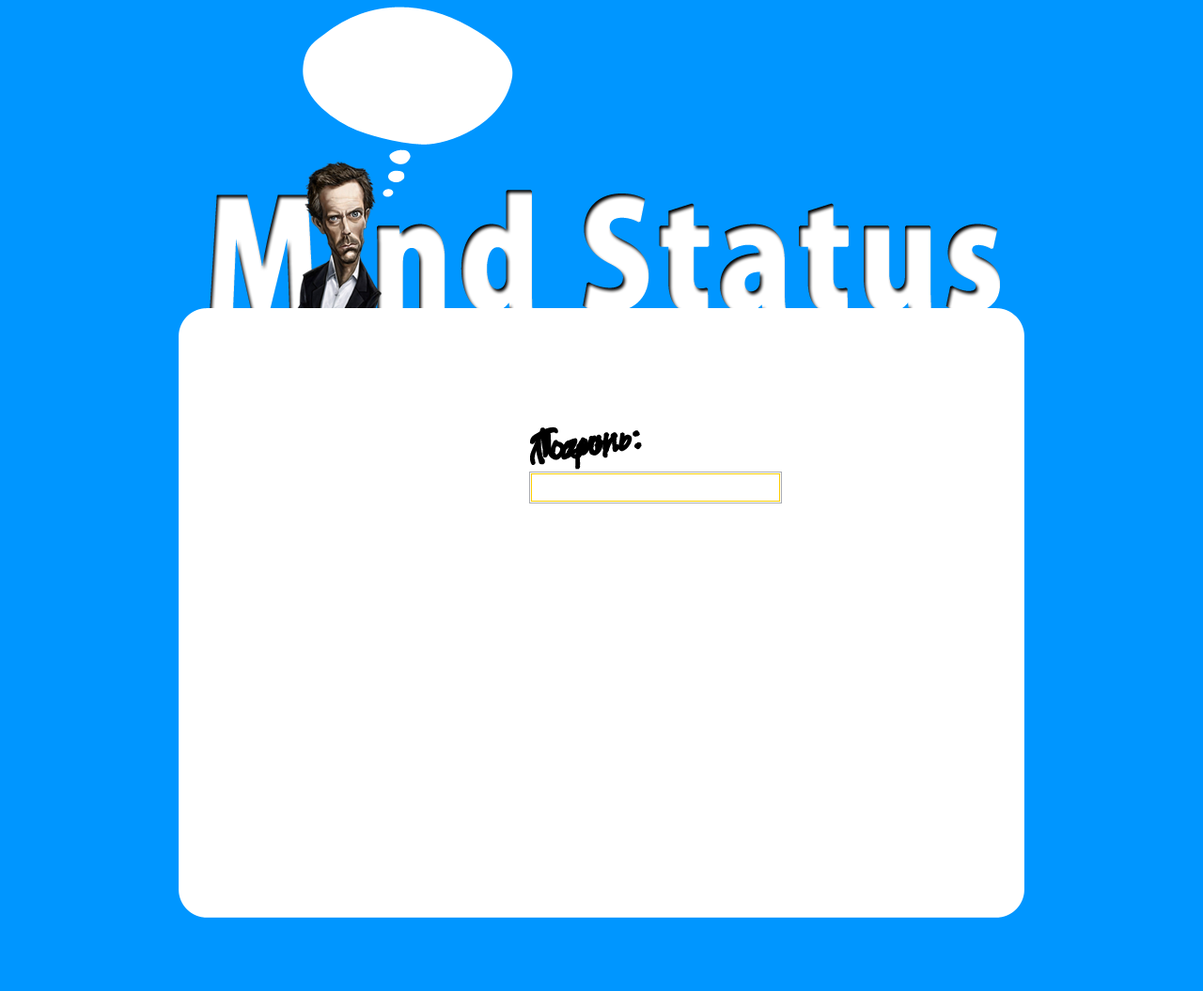
<style>
.page{position:relative;width:1203px;height:991px;background:#0096ff}
.page>*{position:absolute;margin:0}
.t1{font:146.5px "KozGoPro-Heavy";letter-spacing:0.025em;color:#ffffff;font-weight:bold;scale:0.89 1}
.t2{font:40.3px "Festus";letter-spacing:0.025em;color:#000000;font-weight:bold;scale:0.89 1}
</style>
<div class="page">
<p class="t1" style="left:210px;top:190px;width:790px;height:123px">Mind Status</p>
<p class="t2" style="left:530px;top:428px;width:89px;height:37px;rotate:-9deg">Логин:</p>
<p class="t2" style="left:530px;top:427px;width:112px;height:43px;rotate:-9deg">Пароль:</p>
</div>
